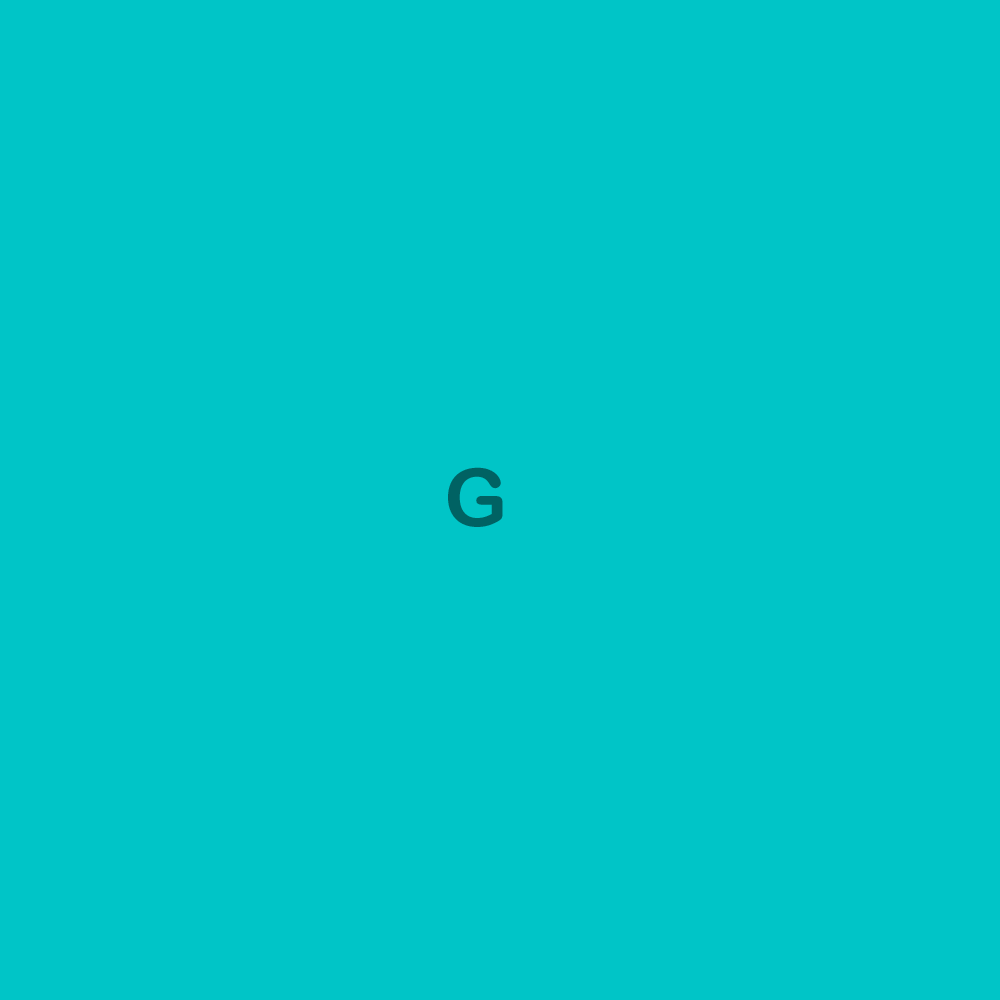
<style>
.page{position:relative;width:1000px;height:1000px;background:#00c5c7}
.page>*{position:absolute;margin:0}
.t1{font:80px "ArialRoundedMTBold";color:#006263}
</style>
<div class="page">
<p class="t1" style="left:448px;top:467px;width:55px;height:60px">G</p>
</div>
